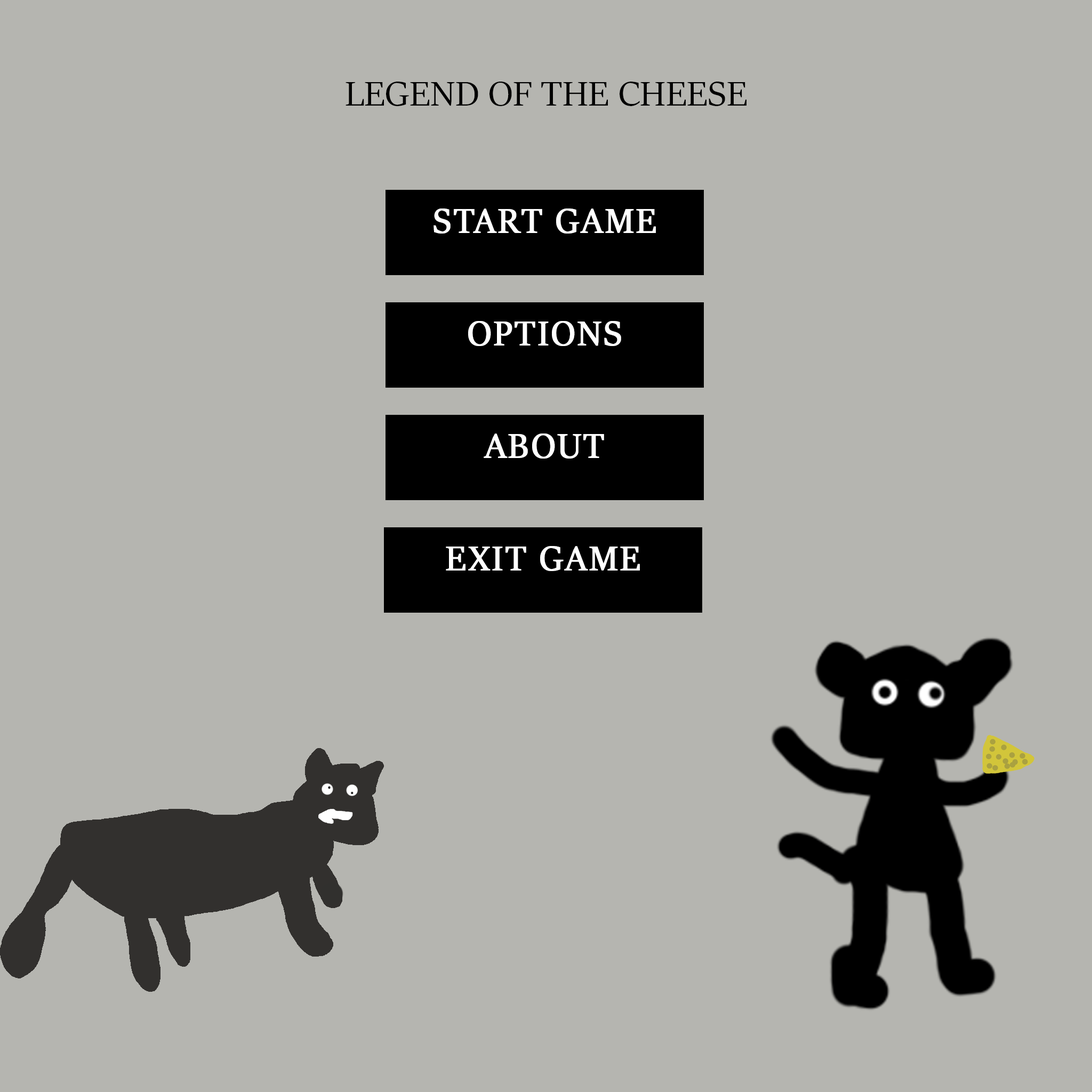
<style>
.page{position:relative;width:1092px;height:1092px;background:#b5b5b0}
.page>*{position:absolute;margin:0}
.t1{font:38.4px "SitkaBanner";letter-spacing:0.005em;color:#000000;text-transform:uppercase}
.t2{font:38.4px "SitkaBanner";letter-spacing:0.04em;color:#ffffff;text-transform:uppercase;font-weight:bold}
</style>
<div class="page">
<p class="t1" style="left:346px;top:82px;width:400px;height:24px">Legend of the cheese</p>
<p class="t2" style="left:433px;top:208px;width:223px;height:26px">Start Game</p>
<p class="t2" style="left:468px;top:321px;width:153px;height:25px">Options</p>
<p class="t2" style="left:484px;top:433px;width:120px;height:26px">About</p>
<p class="t2" style="left:446px;top:546px;width:194px;height:25px">Exit game</p>
</div>
